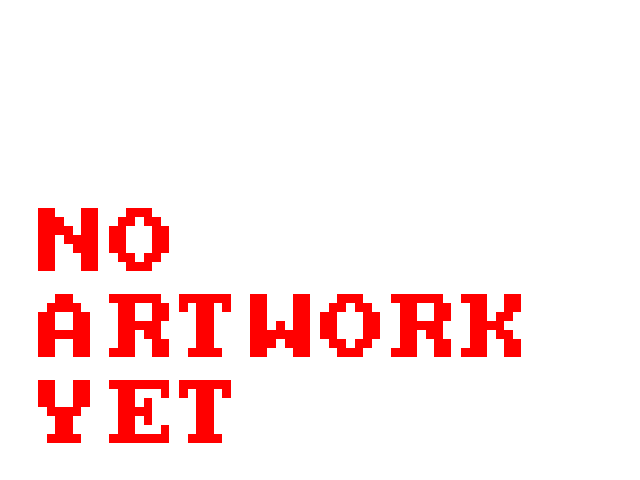
<style>
.page{position:relative;width:640px;height:480px;background:#ffffff}
.page>*{position:absolute;margin:0}
.t1{font:72px "PCSeniorReg";letter-spacing:0.02em;color:#ff0000;scale:0.96 1}
</style>
<div class="page">
<p class="t1" style="left:38px;top:208px;width:483px;height:235px">NO<br>ARTWORK<br>YET</p>
</div>
